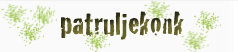
<style>
.page{position:relative;width:238px;height:52px;background:#f9faf9}
.page>*{position:absolute;margin:0}
.t1{font:31.3px "Cracked";scale:1.06 1}
</style>
<div class="page">
<p class="t1" style="left:60px;top:11px;width:124px;height:29px">patruljekonk</p>
</div>
